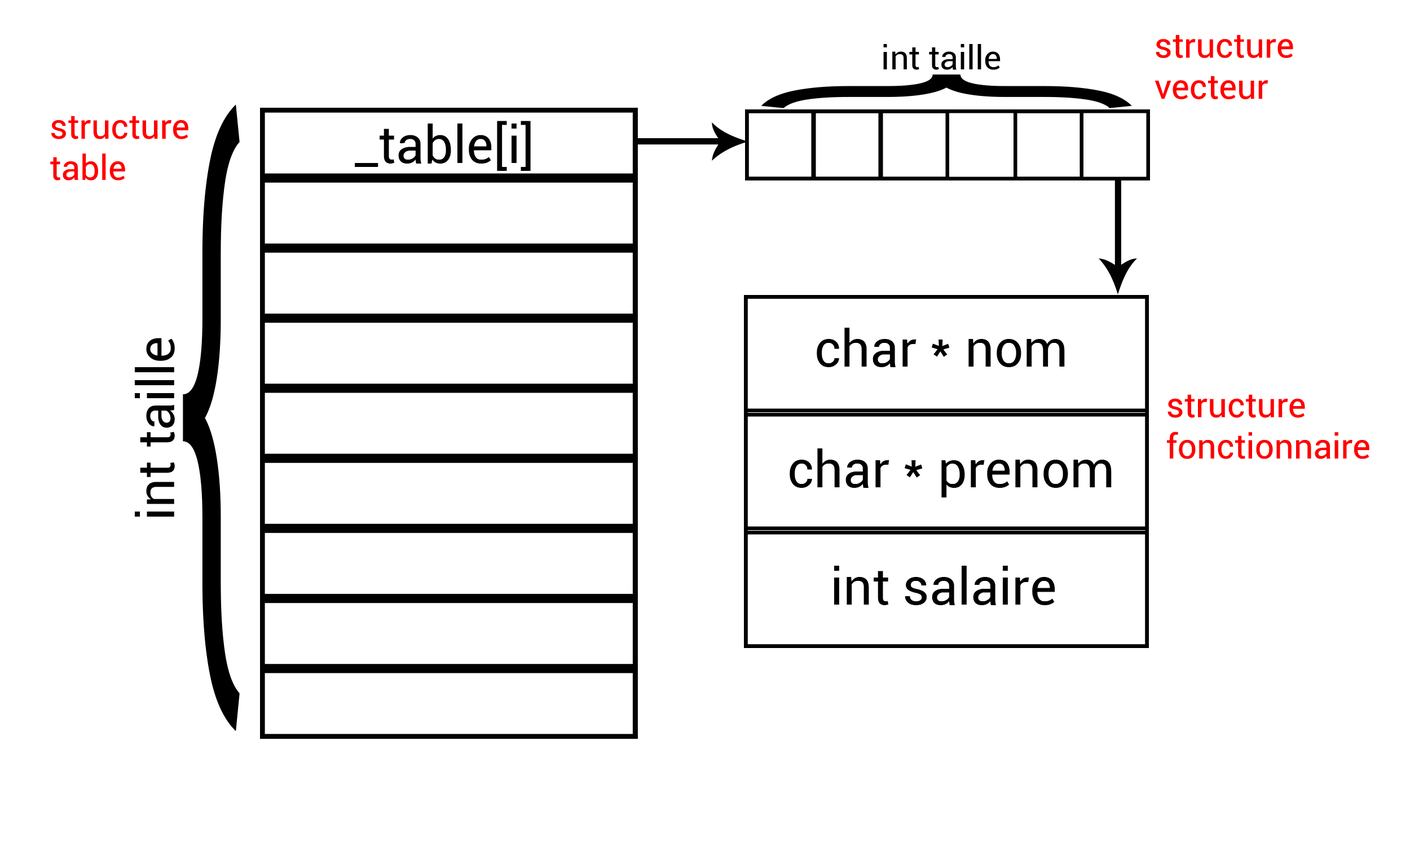
<style>
.page{position:relative;width:1410px;height:846px;background:#ffffff}
.page>*{position:absolute;margin:0}
.t1{font:34.4px "Roboto-Regular";color:#ff0000}
.t2{font:33.7px "Roboto-Regular";color:#000000}
.t3{font:386.9px "Roboto-Regular";color:#000000;scale:0.29 1}
.t4{font:653.8px "Roboto-Regular";color:#000000;scale:0.29 1}
.t5{font:51.6px "Roboto-Regular";color:#000000}
</style>
<div class="page">
<p class="t1" style="left:1154px;top:35px;width:139px;height:64px">structure vecteur</p>
<p class="t2" style="left:883px;top:44px;width:117px;height:26px">int taille</p>
<p class="t3" style="left:761px;top:74px;width:371px;height:34px;rotate:90deg">{</p>
<p class="t4" style="left:183px;top:104px;width:57px;height:627px">{</p>
<p class="t1" style="left:50px;top:116px;width:138px;height:64px">structure table</p>
<p class="t5" style="left:355px;top:121px;width:176px;height:50px">_table[i]</p>
<p class="t5" style="left:817px;top:328px;width:248px;height:39px">char * nom</p>
<p class="t5" style="left:135px;top:338px;width:40px;height:179px;rotate:-90deg">int taille</p>
<p class="t1" style="left:1167px;top:394px;width:202px;height:65px">structure fonctionnaire</p>
<p class="t5" style="left:789px;top:448px;width:322px;height:49px">char * prenom</p>
<p class="t5" style="left:834px;top:566px;width:221px;height:39px">int salaire</p>
</div>
